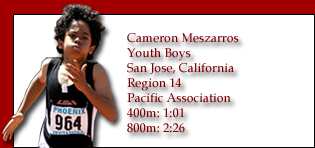
<style>
.page{position:relative;width:315px;height:148px;background:#ffffff}
.page>*{position:absolute;margin:0}
.t1{font:12.5px "BookAntiqua";color:#7b0002}
</style>
<div class="page">
<p class="t1" style="left:127px;top:33px;width:112px;height:100px">Cameron Meszarros<br>Youth Boys<br>San Jose, California<br>Region 14<br>Pacific Association<br>400m: 1:01<br>800m: 2:26</p>
</div>
